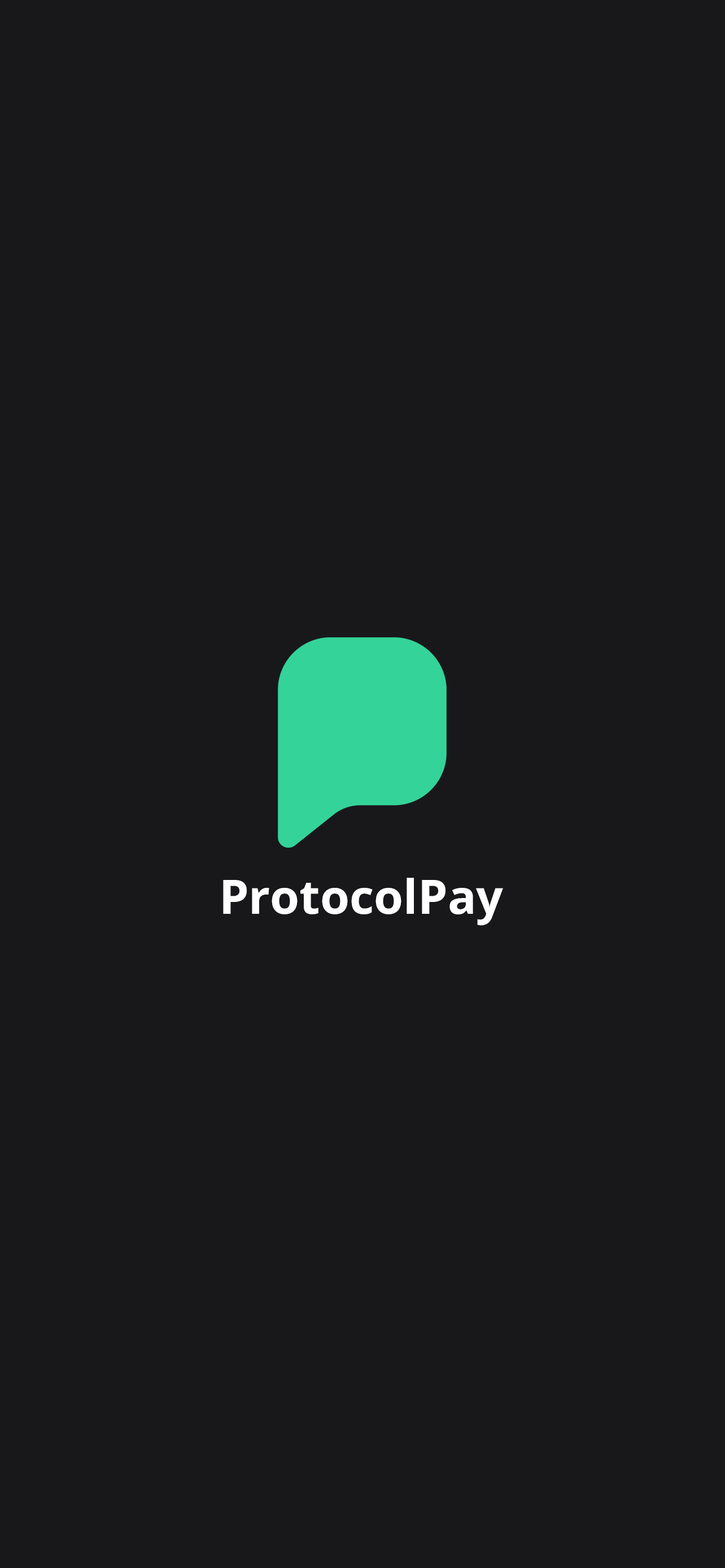
<style>
.page{position:relative;width:725px;height:1568px;background:#18181b}
.page>*{position:absolute;margin:0}
.t1{font:47.4px "OpenSans-Bold";color:#ffffff}
</style>
<div class="page">
<p class="t1" style="left:223px;top:878px;width:280px;height:48px">ProtocolPay</p>
</div>
